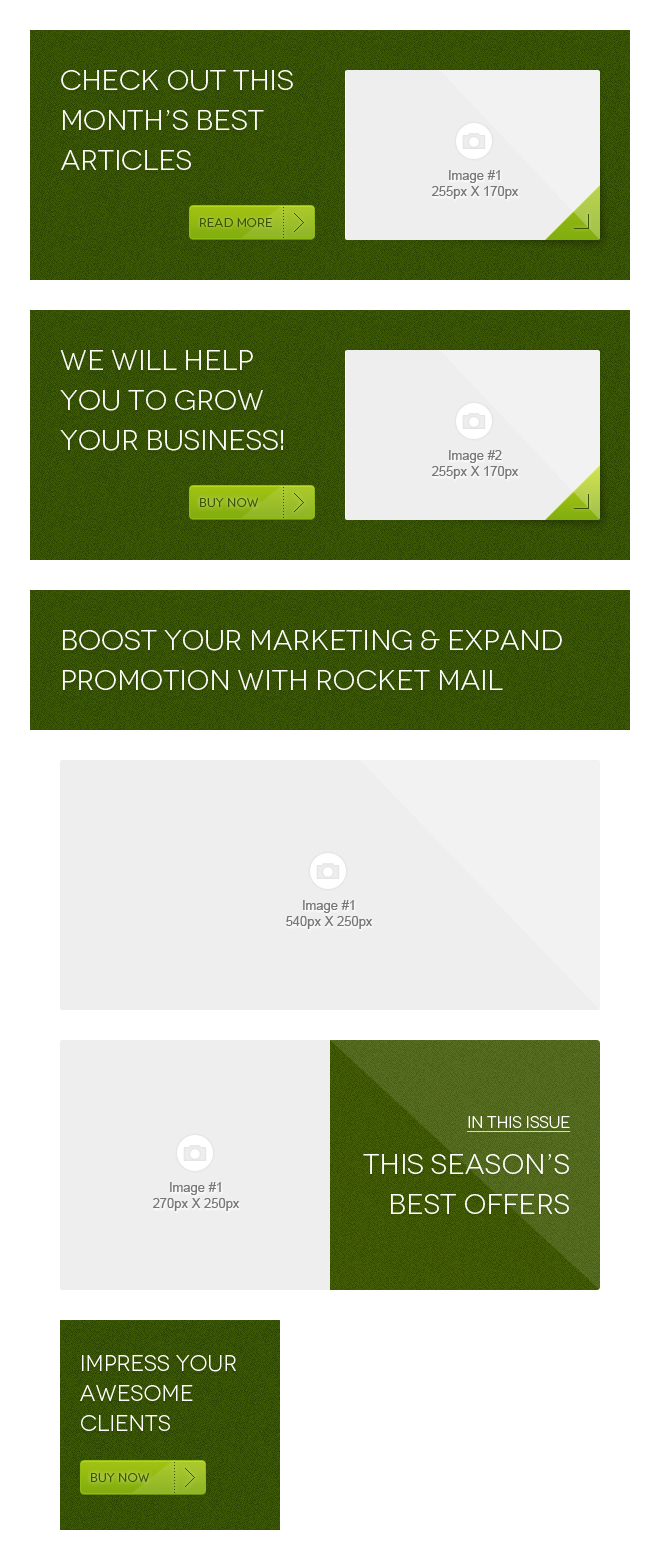
<style>
.page{position:relative;width:660px;height:1560px;background:#ffffff}
.page>*{position:absolute;margin:0}
.t1{font:28px/40px "Novecentowide-Book";color:#fffefe}
.t2{font:12px "Novecentowide-Book";letter-spacing:0.03em;color:#3f5601;text-transform:uppercase}
.t3{font:16px "Novecentowide-Book";color:#ffffff;text-decoration:underline}
.t4{font:28px/40px "Novecentowide-Book";color:#ffffff}
.t5{font:22px/30px "Novecentowide-Book";color:#fffefe}
</style>
<div class="page">
<p class="t1" style="left:61px;top:70px;width:232px;height:100px">Check out this month’s best articles</p>
<p class="t2" style="left:200px;top:218px;width:72px;height:9px">Read More</p>
<p class="t1" style="left:60px;top:350px;width:223px;height:101px">We will help you to grow your business!</p>
<p class="t2" style="left:200px;top:498px;width:59px;height:9px">Buy Now</p>
<p class="t1" style="left:63px;top:630px;width:499px;height:60px">Boost your marketing &amp; Expand promotion with Rocket Mail</p>
<p class="t3" style="left:467px;top:1116px;width:104px;height:16px">In this issue</p>
<p class="t4" style="left:363px;top:1154px;width:206px;height:60px;text-align:right">This season’s best offers</p>
<p class="t5" style="left:80px;top:1355px;width:156px;height:76px">Impress your awesome clients</p>
<p class="t2" style="left:91px;top:1473px;width:59px;height:9px">Buy Now</p>
</div>
